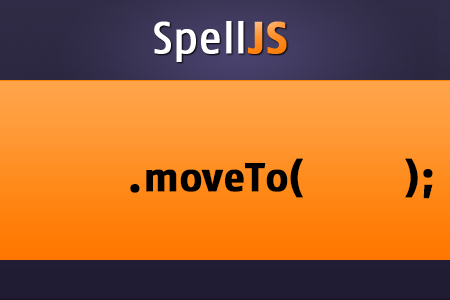
<style>
.page{position:relative;width:450px;height:300px}
.page>*{position:absolute;margin:0}
.t1{font:40px "FagoNo-Bold";color:#000000;font-weight:bold}
</style>
<div class="page">
<p class="t1" style="left:130px;top:158px;width:303px;height:41px">.moveTo(        );</p>
</div>
